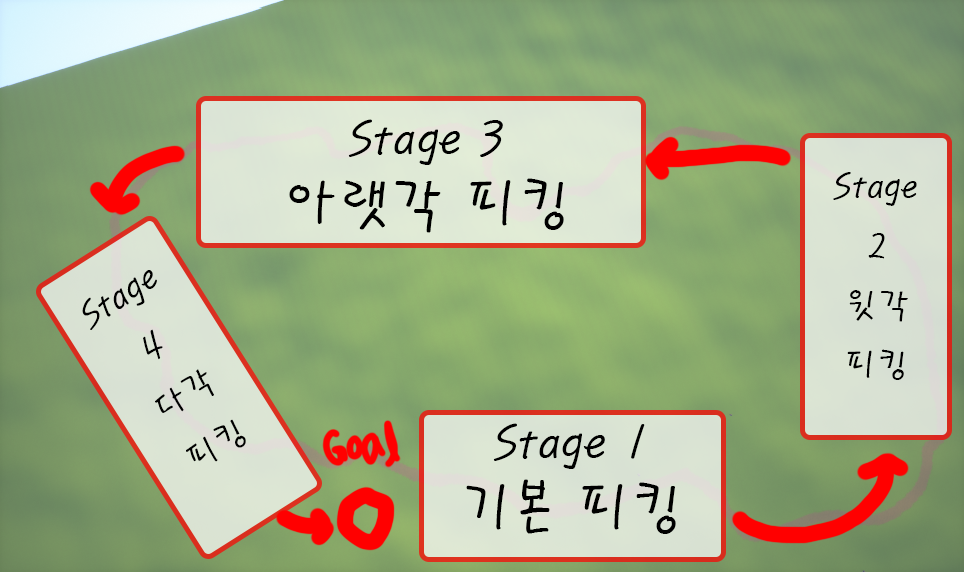
<style>
.page{position:relative;width:964px;height:572px}
.page>*{position:absolute;margin:0}
.t1{font:48px/60px "PyunjiR-HM";color:#000000}
.t2{font:60px/60px "PyunjiR-HM";color:#000000}
.t3{font:36px/60px "PyunjiR-HM";color:#000000}
</style>
<div class="page">
<p class="t1" style="left:289px;top:119px;width:275px;height:114px;text-align:center">Stage 3<br><span class="t2">아랫각 피킹</span></p>
<p class="t3" style="left:833px;top:172px;width:84px;height:208px;text-align:center">Stage 2<br>윗각  피킹</p>
<p class="t3" style="left:82px;top:270px;width:164px;height:192px;text-align:center;rotate:-33deg">Stage 4<br>다각  피킹</p>
<p class="t1" style="left:466px;top:423px;width:210px;height:111px;text-align:center">Stage 1<br><span class="t2">기본 피킹</span></p>
</div>
